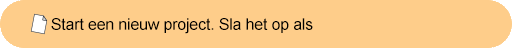
<style>
.page{position:relative;width:512px;height:48px;background:#fecd8a}
.page>*{position:absolute;margin:0}
.t1{font:15.9px "ArialMT";letter-spacing:-0.01em;color:#000000}
</style>
<div class="page">
<p class="t1" style="left:51px;top:18px;width:262px;height:16px">Start een nieuw project. Sla het op als</p>
</div>
